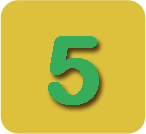
<style>
.page{position:relative;width:146px;height:134px;background:#ddc13c}
.page>*{position:absolute;margin:0}
.t1{font:94.7px "ArialRoundedMTBold";letter-spacing:-0.01em;color:#35ad5a;font-weight:bold}
</style>
<div class="page">
<p class="t1" style="left:48px;top:36px;width:51px;height:69px">5</p>
</div>
